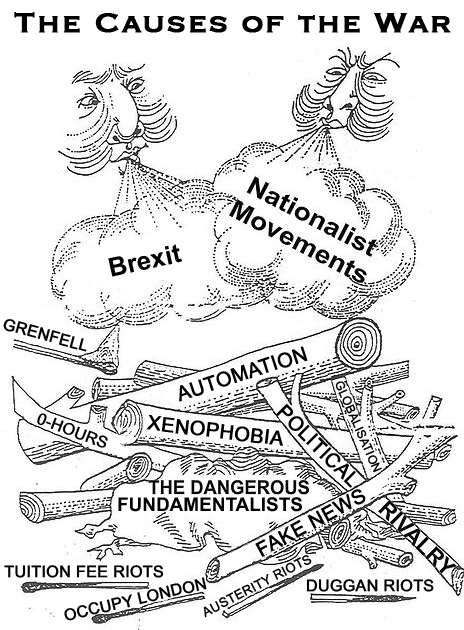
<style>
.page{position:relative;width:464px;height:630px;background:#ffffff}
.page>*{position:absolute;margin:0}
.t1{font:35.9px "Copperplate";color:#000000;font-weight:bold}
.t2{font:25.9px "Arial-BoldMT";color:#000000}
.t3{font:16px "ArialMT";color:#000000;font-weight:bold}
.t4{font:19.9px "ArialMT";color:#000000;font-weight:bold}
.t5{font:12px "ArialMT";color:#000000;font-weight:bold}
.t6{font:18.9px "Arial-BoldMT";color:#000000}
.t7{font:13px "ArialMT";color:#000000;font-weight:bold}
</style>
<div class="page">
<p class="t1" style="left:14px;top:12px;width:437px;height:21px">The Causes of the War</p>
<p class="t2" style="left:108px;top:244px;width:74px;height:33px;rotate:-13deg">Brexit</p>
<p class="t3" style="left:3px;top:319px;width:84px;height:33px;rotate:15deg">GRENFELL</p>
<p class="t4" style="left:179px;top:346px;width:129px;height:56px;rotate:-18deg">AUTOMATION</p>
<p class="t5" style="left:335px;top:381px;width:47px;height:92px;rotate:66deg">GLOBALISATION</p>
<p class="t3" style="left:37px;top:413px;width:71px;height:35px;rotate:21deg">0-HOURS</p>
<p class="t4" style="left:276px;top:404px;width:80px;height:84px;rotate:45deg">POLITICAL</p>
<p class="t4" style="left:146px;top:415px;width:137px;height:31px;rotate:7deg">XENOPHOBIA</p>
<p class="t6" style="left:118px;top:497px;width:184px;height:15px">FUNDAMENTALISTS</p>
<p class="t4" style="left:255px;top:489px;width:111px;height:68px;rotate:-28deg">FAKE NEWS</p>
<p class="t7" style="left:203px;top:555px;width:109px;height:63px;rotate:-27deg">AUSTERITY RIOTS</p>
<p class="t3" style="left:4px;top:565px;width:160px;height:13px">TUITION FEE RIOTS</p>
<p class="t3" style="left:64px;top:577px;width:143px;height:44px;rotate:-13deg">OCCUPY LONDON</p>
<p class="t3" style="left:306px;top:579px;width:128px;height:13px">DUGGAN RIOTS</p>
</div>
